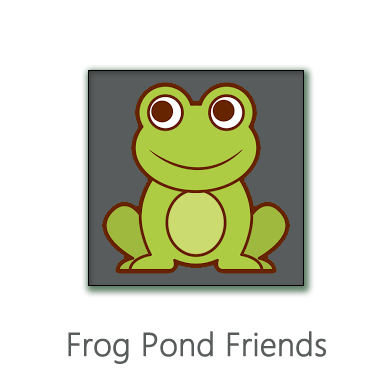
<style>
.page{position:relative;width:392px;height:392px;background:#ffffff}
.page>*{position:absolute;margin:0}
.t1{font:30px "MicrosoftYaHeiUILight";color:#595c5c;font-weight:bold}
</style>
<div class="page">
<p class="t1" style="left:68px;top:331px;width:258px;height:33px">Frog Pond Friends</p>
</div>
